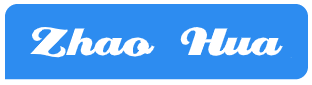
<style>
.page{position:relative;width:312px;height:85px;background:#2d8cf0}
.page>*{position:absolute;margin:0}
.t1{font:48px "Creampuff";color:#ffffff}
</style>
<div class="page">
<p class="t1" style="left:30px;top:26px;width:253px;height:32px">Zhao  Hua</p>
</div>
